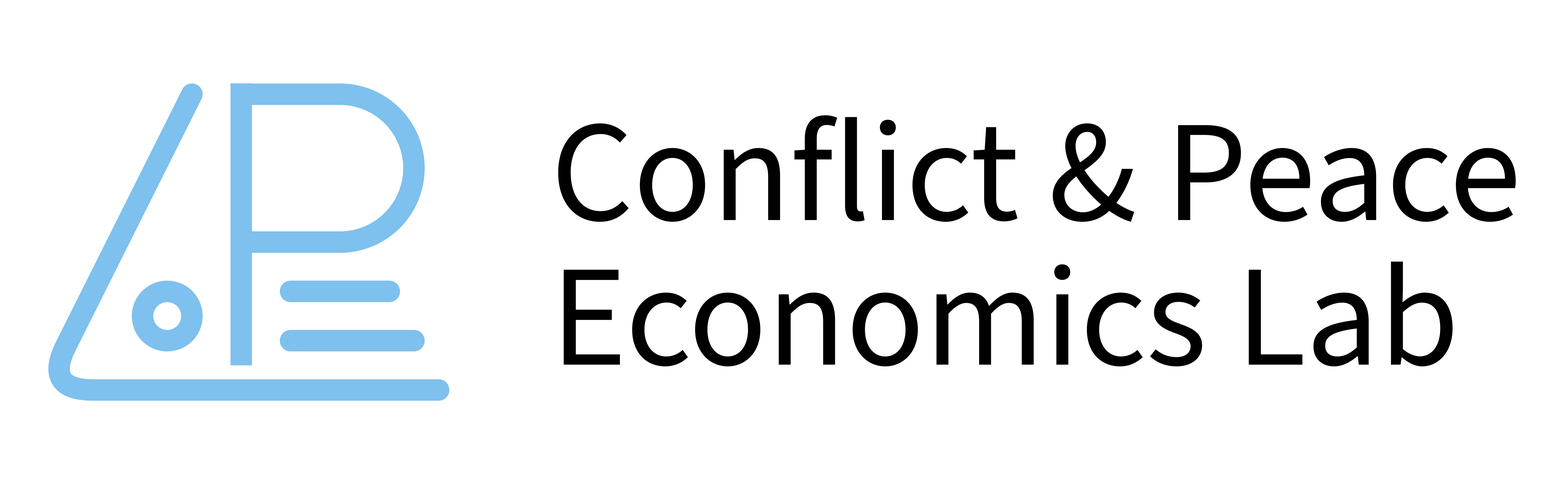
<style>
.page{position:relative;width:1568px;height:482px;background:#ffffff}
.page>*{position:absolute;margin:0}
.t1{font:144.7px/144.7px "SourceSans3Roman-Regular";color:#000000}
</style>
<div class="page">
<p class="t1" style="left:558px;top:115px;width:958px;height:252px">Conflict &amp; Peace<br>Economics Lab</p>
</div>
